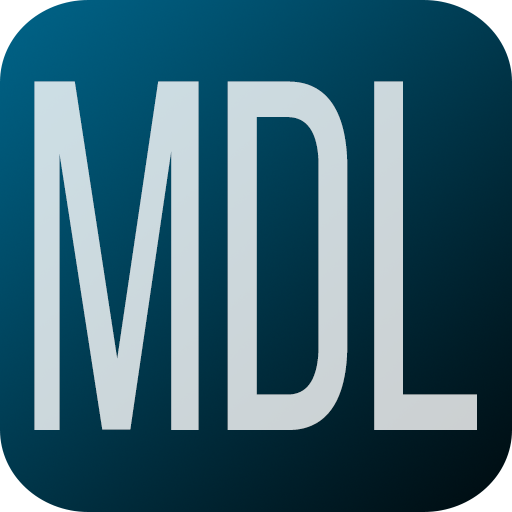
<style>
.page{position:relative;width:512px;height:512px}
.page>*{position:absolute;margin:0}
.t1{font:497.6px "BebasNeueRegular";color:#ccd8dc;scale:0.74 1}
</style>
<div class="page">
<p class="t1" style="left:34px;top:81px;width:443px;height:349px">MDL</p>
</div>
